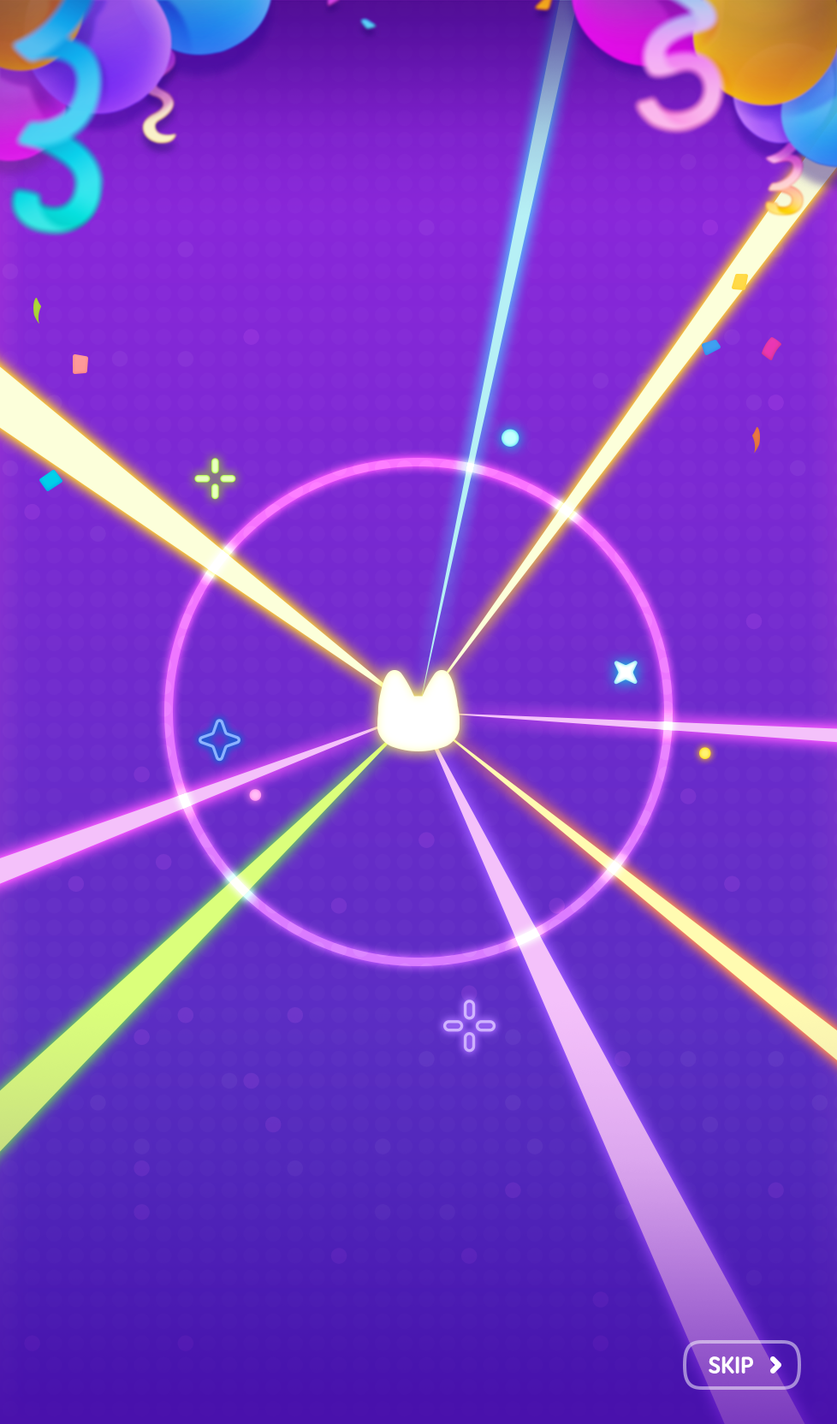
<style>
.page{position:relative;width:837px;height:1424px}
.page>*{position:absolute;margin:0}
.t1{font:25.5px "UbuntuTitling-Bold";letter-spacing:-0.025em;color:#ffffff;text-transform:uppercase}
</style>
<div class="page">
<p class="t1" style="left:709px;top:1357px;width:44px;height:17px">Skip</p>
</div>
